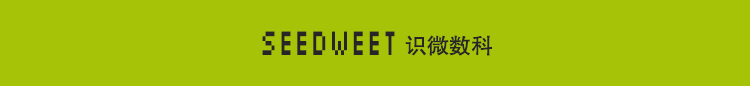
<style>
.page{position:relative;width:750px;height:86px;background:#a6c307}
.page>*{position:absolute;margin:0}
.t1{font:37.4px "04b03";letter-spacing:0.16em;color:#262626;scale:0.64 1}
.t2{font:22px "FZHTJW--GB1-0";color:#262626}
</style>
<div class="page">
<p class="t1" style="left:262px;top:31px;width:133px;height:24px">SEEDWEET</p>
<p class="t2" style="left:405px;top:35px;width:87px;height:21px">识微数科</p>
</div>
